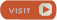
<style>
.page{position:relative;width:57px;height:20px;background:#c5552f}
.page>*{position:absolute;margin:0}
.t1{font:8px "Silkscreen";letter-spacing:-0.04em;color:#c3b5b5;text-transform:uppercase;font-weight:bold}
</style>
<div class="page">
<p class="t1" style="left:9px;top:8px;width:21px;height:6px">Visit</p>
</div>
